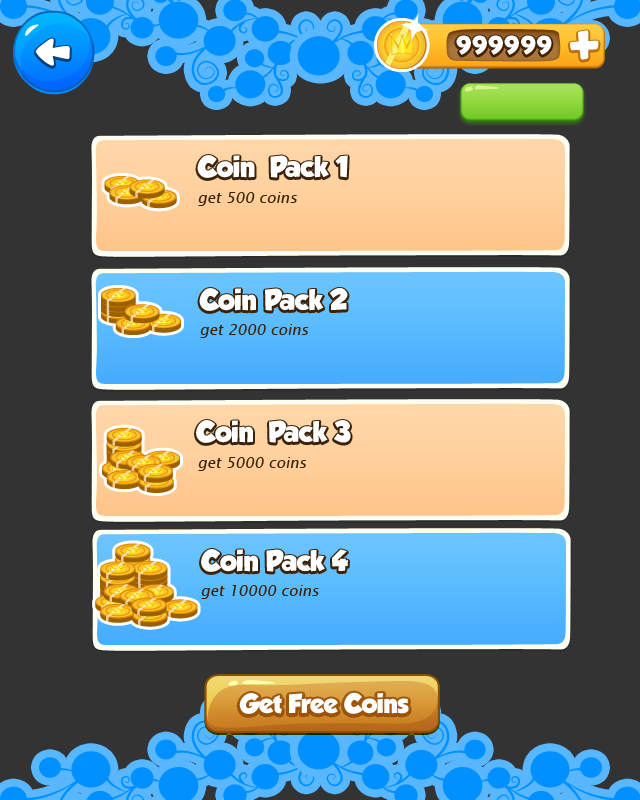
<style>
.page{position:relative;width:640px;height:800px;background:#333333}
.page>*{position:absolute;margin:0}
.t1{font:25px "Skranji-Bold";letter-spacing:0.025em;color:#ffffff}
.t2{font:26px "GROBOLD";letter-spacing:-0.02em;color:#ffffff}
.t3{font:15px "LucidaSansUnicode";color:#3a230a;font-style:italic}
.t4{font:24px "GROBOLD";letter-spacing:-0.02em;color:#ffffff}
</style>
<div class="page">
<p class="t1" style="left:456px;top:35px;width:96px;height:20px">999999</p>
<p class="t2" style="left:197px;top:155px;width:151px;height:23px">Coin  Pack 1</p>
<p class="t3" style="left:198px;top:192px;width:99px;height:14px">get 500 coins</p>
<p class="t2" style="left:199px;top:288px;width:149px;height:23px">Coin Pack 2</p>
<p class="t3" style="left:200px;top:324px;width:108px;height:14px">get 2000 coins</p>
<p class="t2" style="left:196px;top:420px;width:155px;height:23px">Coin  Pack 3</p>
<p class="t3" style="left:198px;top:457px;width:108px;height:14px">get 5000 coins</p>
<p class="t2" style="left:201px;top:549px;width:147px;height:23px">Coin Pack 4</p>
<p class="t3" style="left:201px;top:585px;width:118px;height:14px">get 10000 coins</p>
<p class="t4" style="left:239px;top:692px;width:170px;height:22px">Get Free Coins</p>
</div>
